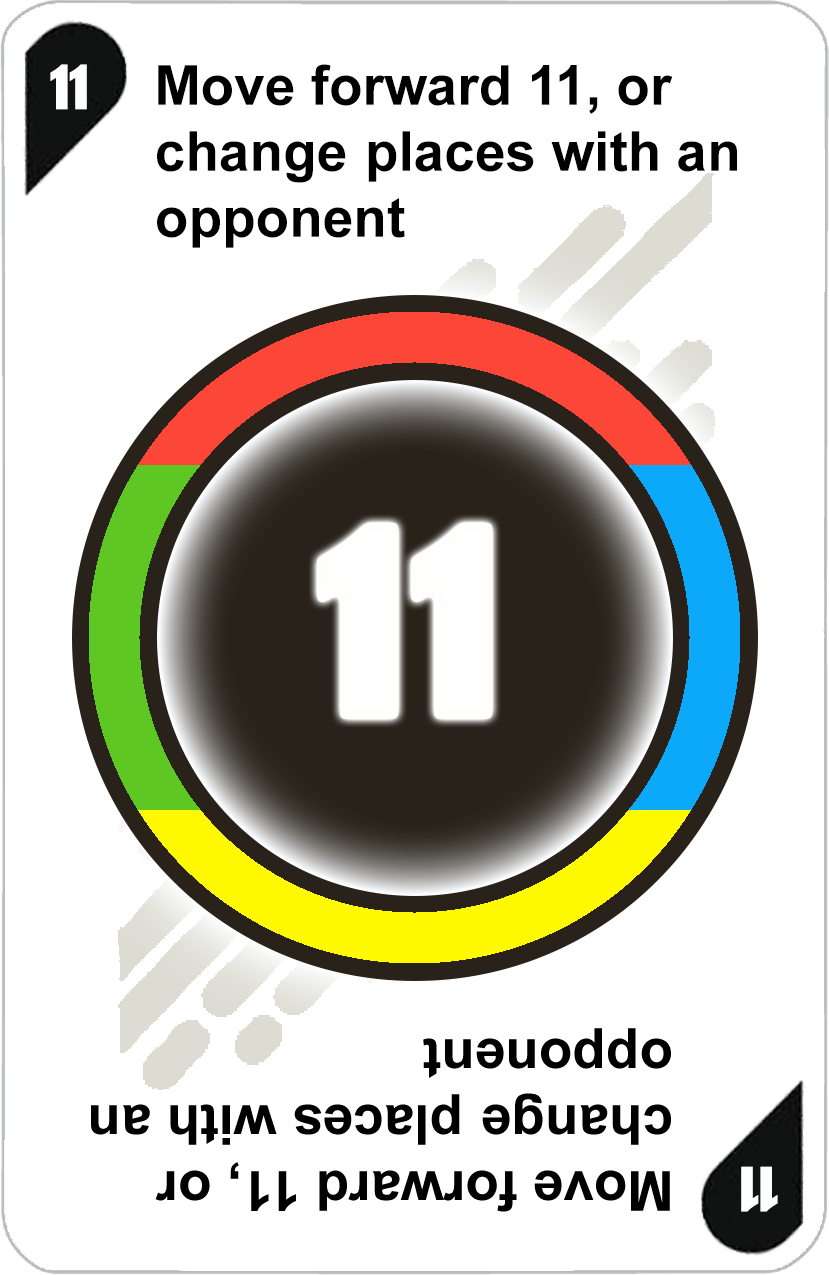
<style>
.page{position:relative;width:829px;height:1275px;background:#ffffff}
.page>*{position:absolute;margin:0}
.t1{font:72px "AdGothic-Regular";color:#ffffff}
.t2{font:55px "Arial-BoldMT";color:#000000}
.t3{font:300px "AdGothic-Regular";color:#ffffff}
</style>
<div class="page">
<p class="t1" style="left:50px;top:64px;width:37px;height:46px">11</p>
<p class="t2" style="left:157px;top:64px;width:580px;height:184px">Move forward 11, or <br>change places with an<br>opponent</p>
<p class="t3" style="left:322px;top:527px;width:72px;height:187px">1</p>
<p class="t3" style="left:416px;top:527px;width:72px;height:187px">1</p>
</div>
